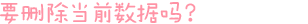
<style>
.page{position:relative;width:308px;height:24px;background:#ffffff}
.page>*{position:absolute;margin:0}
.t1{font:26px "¢è?";color:#ff93a5}
</style>
<div class="page">
<p class="t1" style="left:0px;top:2px;width:196px;height:22px">要删除当前数据吗？</p>
</div>
